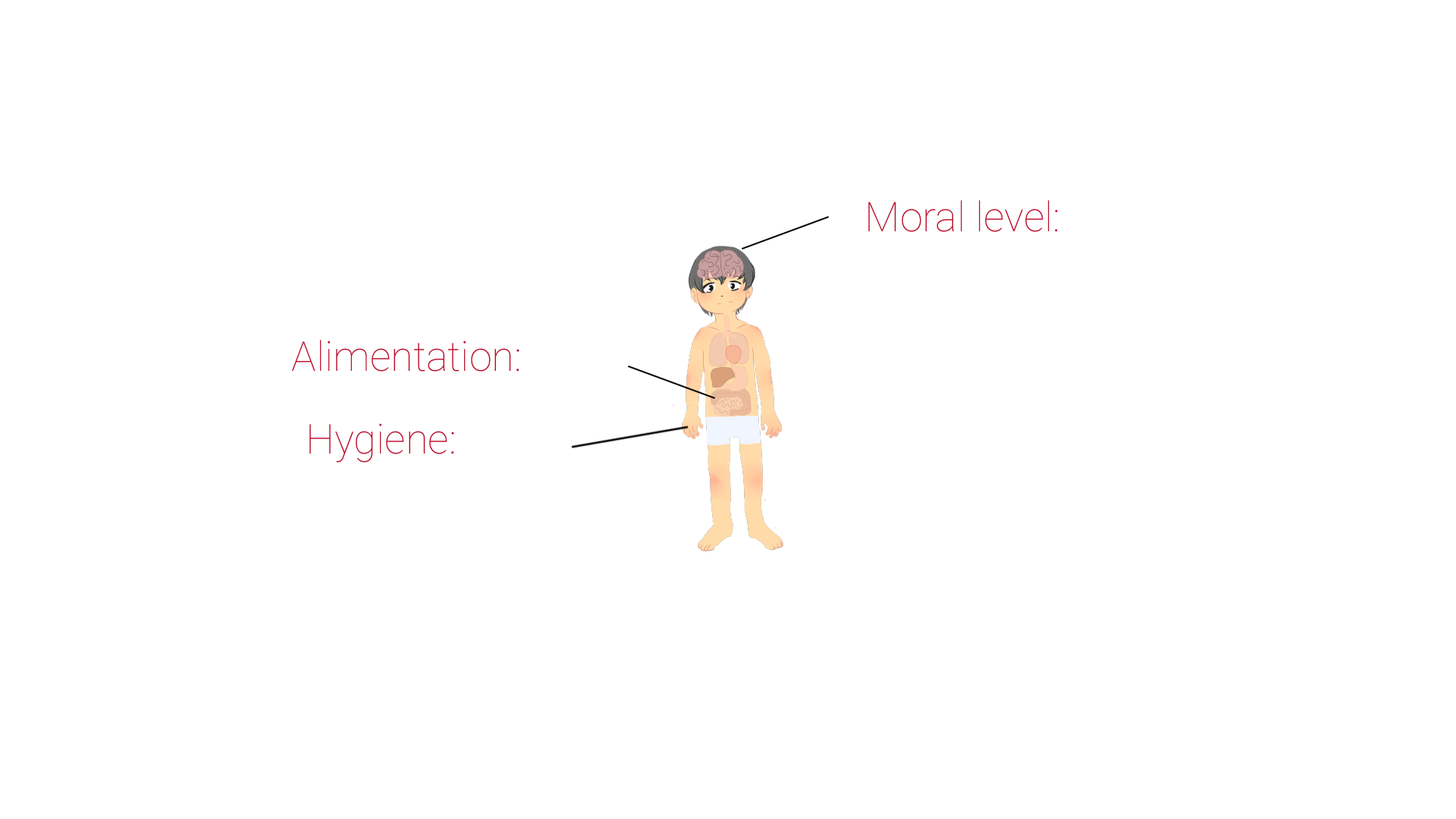
<style>
.page{position:relative;width:1456px;height:819px;background:#ffffff}
.page>*{position:absolute;margin:0}
.t1{font:41.1px "Roboto-Thin";color:#bb122e}
</style>
<div class="page">
<p class="t1" style="left:868px;top:200px;width:190px;height:32px">Moral level:</p>
<p class="t1" style="left:292px;top:340px;width:227px;height:32px">Alimentation:</p>
<p class="t1" style="left:309px;top:423px;width:145px;height:40px">Hygiene:</p>
</div>
